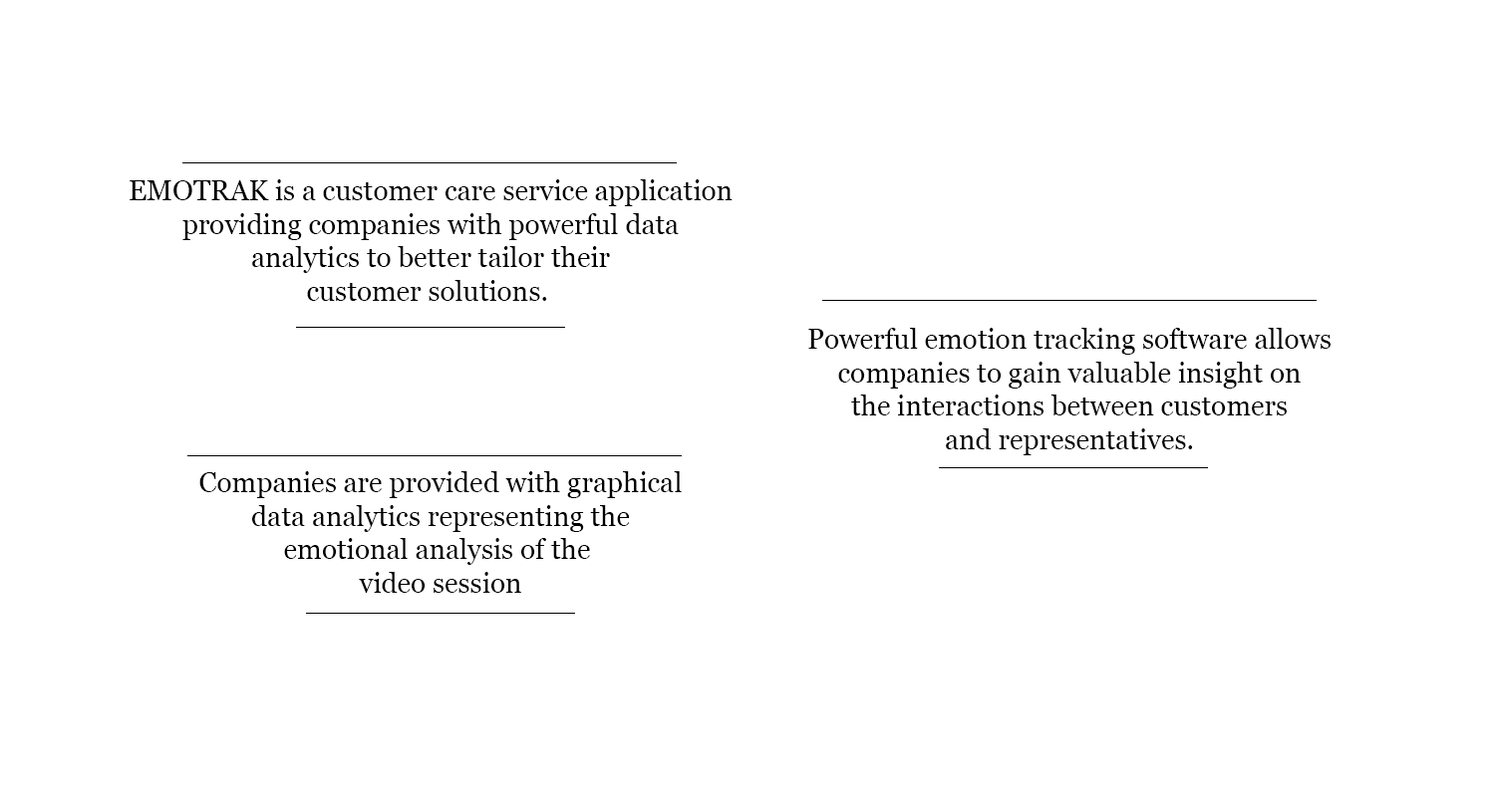
<style>
.page{position:relative;width:1495px;height:797px;background:#ffffff}
.page>*{position:absolute;margin:0}
.t1{font:27.9px "Georgia";color:#000000}
</style>
<div class="page">
<p class="t1" style="left:130px;top:179px;width:603px;height:122px;text-align:center">EMOTRAK is a customer care service application<br>providing companies with powerful data<br>analytics to better tailor their<br>customer solutions.</p>
<p class="t1" style="left:808px;top:328px;width:523px;height:128px;text-align:center">Powerful emotion tracking software allows<br>companies to gain valuable insight on<br>the interactions between customers<br>and representatives.</p>
<p class="t1" style="left:199px;top:472px;width:483px;height:121px;text-align:center">Companies are provided with graphical<br>data analytics representing the<br>emotional analysis of the <br>video session</p>
</div>
